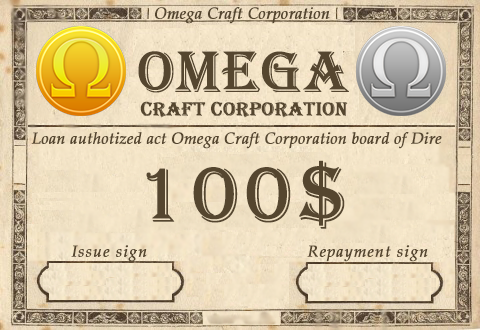
<style>
.page{position:relative;width:480px;height:330px}
.page>*{position:absolute;margin:0}
.t1{font:16px "BookAntiqua-Italic";color:#55462f;font-weight:bold}
.t2{font:60px "Algerian";color:#55462f;font-weight:bold}
.t3{font:20px "Algerian";color:#55462f;font-weight:bold}
.t4{font:16px "PalatinoLinotype-Italic";color:#55462f;font-variant:small-caps;font-weight:bold}
.t5{font:80px "Algerian";letter-spacing:0.05em;color:#55462f;font-variant:small-caps;font-weight:bold}
.t6{font:16px "PalatinoLinotype-Italic";letter-spacing:0.05em;color:#55462f;font-variant:small-caps;font-weight:bold}
</style>
<div class="page">
<p class="t1" style="left:155px;top:7px;width:175px;height:17px">Omega Craft Corporation</p>
<p class="t2" style="left:138px;top:51px;width:211px;height:42px">OMEGA</p>
<p class="t3" style="left:140px;top:101px;width:208px;height:17px">CRAFT CORPORATION</p>
<p class="t4" style="left:31px;top:132px;width:411px;height:17px">Loan authotized act Omega Craft Corporation board of Dire</p>
<p class="t5" style="left:146px;top:160px;width:199px;height:69px">100$</p>
<p class="t6" style="left:71px;top:245px;width:76px;height:17px">Issue sign</p>
<p class="t6" style="left:307px;top:245px;width:121px;height:17px">Repayment sign</p>
</div>
